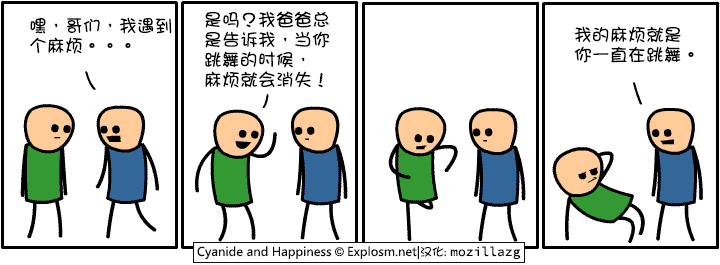
<style>
.page{position:relative;width:720px;height:265px;background:#ffffff}
.page>*{position:absolute;margin:0}
.t1{font:18px/20px "DFGirl";color:#000000}
</style>
<div class="page">
<p class="t1" style="left:30px;top:17px;width:142px;height:37px">嘿，哥们，我遇到<br>个麻烦。。。</p>
<p class="t1" style="left:205px;top:11px;width:125px;height:77px">是吗？我爸爸总<br>是告诉我，当你<br>跳舞的时候，<br>麻烦就会消失！</p>
<p class="t1" style="left:574px;top:26px;width:120px;height:37px">我的麻烦就是<br>你一直在跳舞。</p>
</div>
